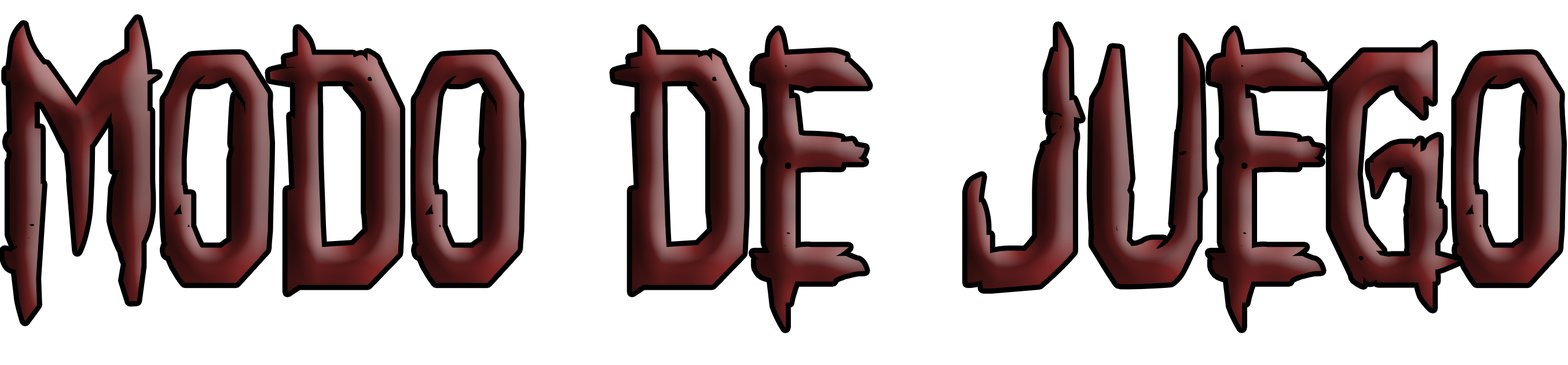
<style>
.page{position:relative;width:1568px;height:365px;background:#ffffff}
.page>*{position:absolute;margin:0}
.t1{font:330.9px "HorroroidBold"}
</style>
<div class="page">
<p class="t1" style="left:4px;top:19px;width:1558px;height:309px">MODO DE JUEGO</p>
</div>
